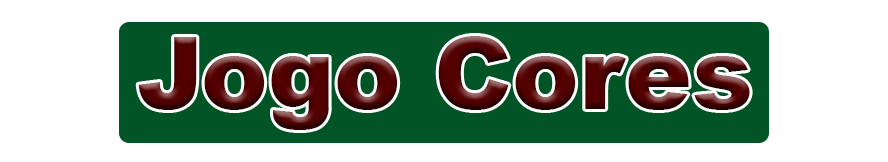
<style>
.page{position:relative;width:888px;height:162px;background:#ffffff}
.page>*{position:absolute;margin:0}
.t1{font:100px "Arial-Black"}
</style>
<div class="page">
<p class="t1" style="left:138px;top:36px;width:612px;height:94px">Jogo Cores</p>
</div>
